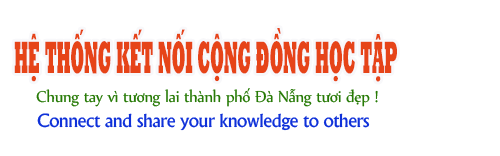
<style>
.page{position:relative;width:500px;height:156px;background:#ffffff}
.page>*{position:absolute;margin:0}
.t1{font:46.1px "UTM-Rockwell";letter-spacing:-0.025em;color:#e64418;scale:0.35 1}
.t2{font:19.1px "UTM-Nyala";letter-spacing:-0.025em;color:#277a06;scale:0.97 1}
.t3{font:19.5px "UTM-Khuccamta";letter-spacing:-0.025em;color:#0f31d9;scale:1.05 1}
</style>
<div class="page">
<p class="t1" style="left:14px;top:28px;width:383px;height:54px">HỆ THỐNG KẾT NỐI CỘNG ĐỒNG HỌC TẬP</p>
<p class="t2" style="left:36px;top:88px;width:342px;height:19px">Chung tay vì tương lai thành phố Đà Nẵng tươi đẹp !</p>
<p class="t3" style="left:37px;top:113px;width:333px;height:18px">Connect and share your knowledge to others</p>
</div>
